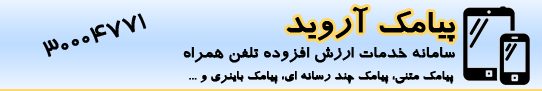
<style>
.page{position:relative;width:542px;height:91px}
.page>*{position:absolute;margin:0}
.t1{font:24px "BHoma";color:#010100;font-weight:bold}
.t2{font:36px "BTraffic";color:#010100;font-weight:bold}
.t3{font:18px "BTraffic";color:#010100;font-weight:bold}
.t4{font:14px "BTraffic";color:#010100;font-weight:bold}
</style>
<div class="page">
<p class="t1" style="left:42px;top:13px;width:105px;height:44px;rotate:-16deg">30004771</p>
<p class="t2" style="left:286px;top:7px;width:169px;height:35px">پیامک آروید</p>
<p class="t3" style="left:183px;top:47px;width:272px;height:16px">سامانه خدمات ارزش افزوده تلفن همراه</p>
<p class="t4" style="left:189px;top:71px;width:265px;height:13px">پیامک متنی، پیامک چند رسانه ای، پیامک باینری و ...</p>
</div>
